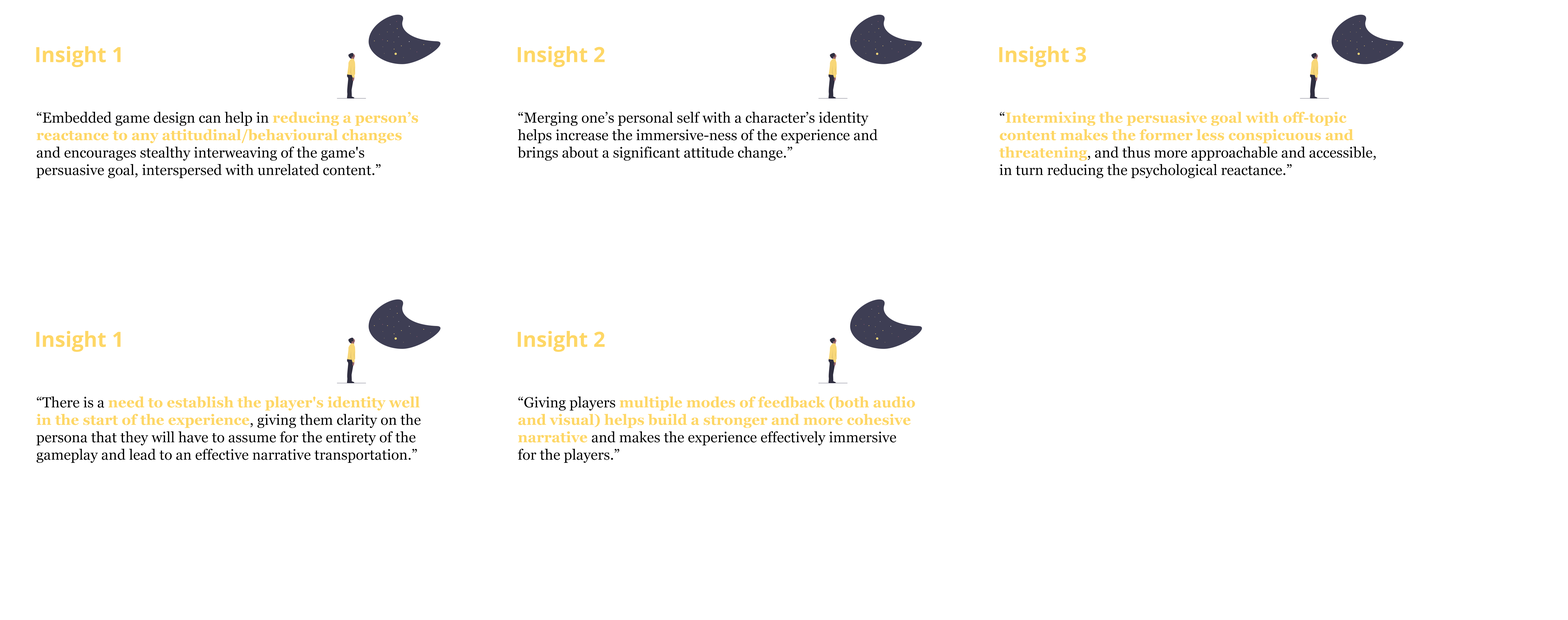
<style>
.page{position:relative;width:1568px;height:620px;background:#ffffff}
.page>*{position:absolute;margin:0}
.t1{font:20.9px "OpenSans-Bold";color:#fed766}
.t2{font:14.5px "Georgia";color:#000000}
.t3{font:14.5px "Georgia-Bold";color:#fed766}
</style>
<div class="page">
<p class="t1" style="left:36px;top:46px;width:85px;height:21px">Insight 1</p>
<p class="t1" style="left:518px;top:46px;width:87px;height:21px">Insight 2</p>
<p class="t1" style="left:999px;top:46px;width:87px;height:21px">Insight 3</p>
<p class="t2" style="left:36px;top:112px;width:382px;height:66px">“Embedded game design can help in <span class="t3">reducing a person’s <br>reactance to any attitudinal/behavioural changes</span> <br>and encourages stealthy interweaving of the game's <br>persuasive goal, interspersed with unrelated content.”</p>
<p class="t2" style="left:518px;top:112px;width:360px;height:49px">“Merging one’s personal self with a character’s identity <br>helps increase the immersive-ness of the experience and <br>brings about a significant attitude change.”</p>
<p class="t3" style="left:999px;top:112px;width:377px;height:66px"><span class="t2">“</span>Intermixing the persuasive goal with off-topic <br>content makes the former less conspicuous and <br>threatening<span class="t2">, and thus more approachable and accessible, <br>in turn reducing the psychological reactance.”</span></p>
<p class="t1" style="left:36px;top:331px;width:85px;height:21px">Insight 1</p>
<p class="t1" style="left:518px;top:331px;width:87px;height:21px">Insight 2</p>
<p class="t2" style="left:36px;top:396px;width:385px;height:67px">“There is a <span class="t3">need to establish the player's identity well <br>in the start of the experience</span>, giving them clarity on the <br>persona that they will have to assume for the entirety of the <br>gameplay and lead to an effective narrative transportation.”</p>
<p class="t3" style="left:518px;top:396px;width:397px;height:67px"><span class="t2">“Giving players </span>multiple modes of feedback (both audio <br>and visual) helps build a stronger and more cohesive <br>narrative <span class="t2">and makes the experience effectively immersive <br>for the players.”</span></p>
</div>
